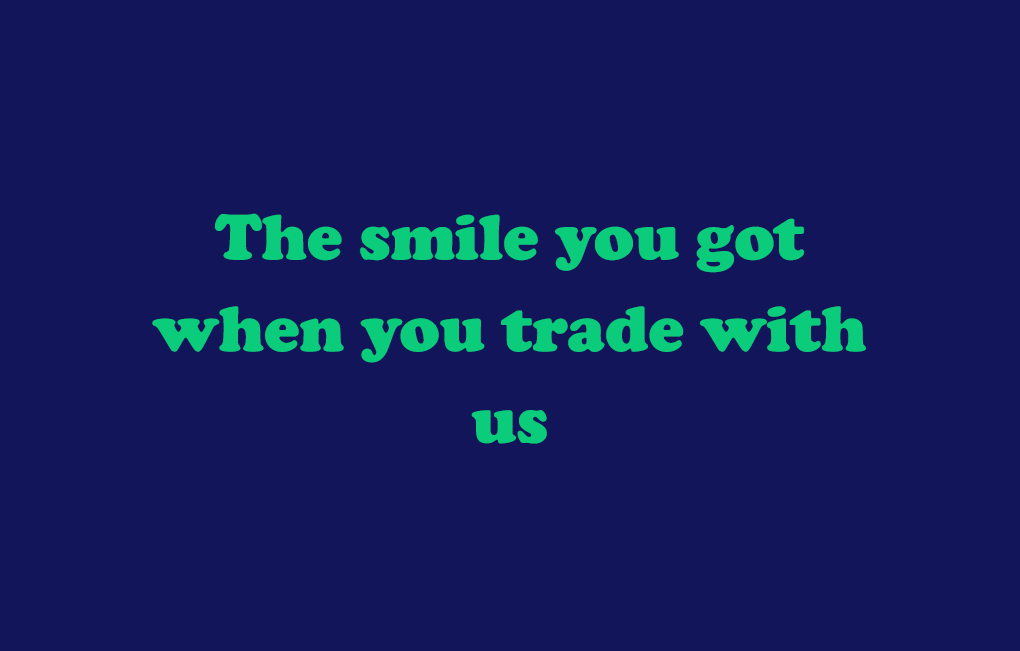
<style>
.page{position:relative;width:1020px;height:651px;background:#13155a}
.page>*{position:absolute;margin:0}
.t1{font:66.7px/91.7px "CooperBlack";color:#0acc7b}
</style>
<div class="page">
<p class="t1" style="left:152px;top:213px;width:714px;height:231px;text-align:center">The smile you got<br>when you trade with<br>us</p>
</div>
